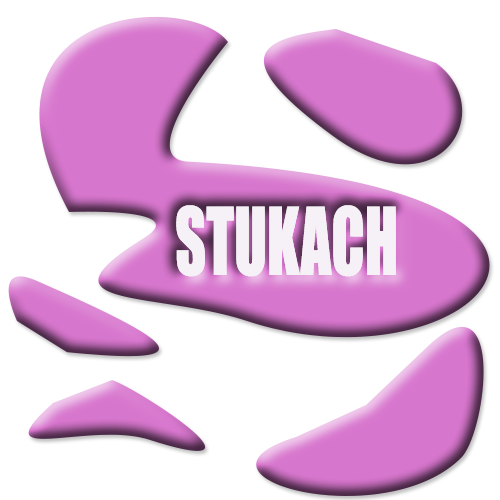
<style>
.page{position:relative;width:500px;height:500px;background:#ffffff}
.page>*{position:absolute;margin:0}
.t1{font:86.2px "Impact";color:#f6f0f7;scale:0.7 1}
</style>
<div class="page">
<p class="t1" style="left:176px;top:205px;width:220px;height:72px">STUKACH</p>
</div>
